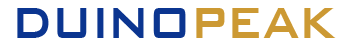
<style>
.page{position:relative;width:344px;height:48px;background:#ffffff}
.page>*{position:absolute;margin:0}
.t1{font:72px "BankGothicBT-Medium";color:#0b3590;scale:0.8 1}
.t2{font:72px "BankGothicBT-Medium";color:#cc9933;scale:0.8 1}
</style>
<div class="page">
<p class="t1" style="left:17px;top:8px;width:319px;height:30px">duino<span class="t2">peak</span></p>
</div>
